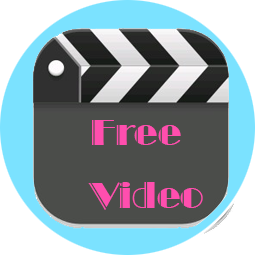
<style>
.page{position:relative;width:256px;height:256px;background:#4b4d4a}
.page>*{position:absolute;margin:0}
.t1{font:36px "BroadwayEngravedBT-Regular";color:#ff4eae}
</style>
<div class="page">
<p class="t1" style="left:88px;top:120px;width:115px;height:90px">Free<br>Video</p>
</div>
